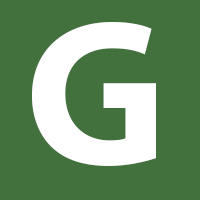
<style>
.page{position:relative;width:200px;height:200px;background:#42713e}
.page>*{position:absolute;margin:0}
.t1{font:208.3px "MyriadPro-Bold";color:#ffffff}
</style>
<div class="page">
<p class="t1" style="left:32px;top:22px;width:124px;height:144px">G</p>
</div>
